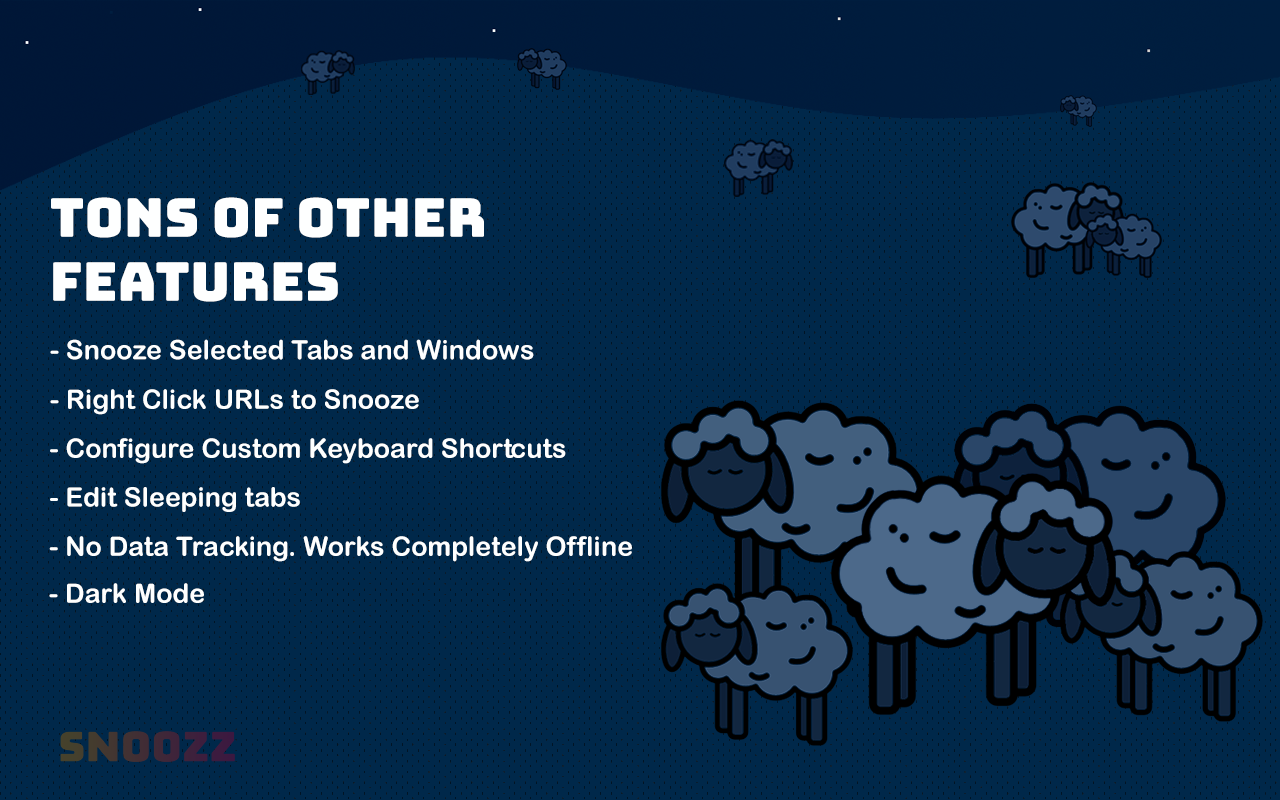
<style>
.page{position:relative;width:1280px;height:800px;background:#00284a}
.page>*{position:absolute;margin:0}
.t1{font:53.3px "Bungee-Regular";letter-spacing:0.005em;color:#feffff}
.t2{font:26.7px "ArialRoundedMTBold";letter-spacing:0.005em;color:#feffff}
</style>
<div class="page">
<p class="t1" style="left:51px;top:197px;width:433px;height:105px">Tons of other<br>features</p>
<p class="t2" style="left:50px;top:339px;width:484px;height:21px">- Snooze Selected Tabs and Windows</p>
<p class="t2" style="left:50px;top:389px;width:369px;height:26px">- Right Click URLs to Snooze</p>
<p class="t2" style="left:50px;top:438px;width:516px;height:26px">- Configure Custom Keyboard Shortcuts</p>
<p class="t2" style="left:50px;top:487px;width:250px;height:25px">- Edit Sleeping tabs</p>
<p class="t2" style="left:49px;top:536px;width:583px;height:26px">- No Data Tracking. Works Completely Offline</p>
<p class="t2" style="left:49px;top:583px;width:155px;height:20px">- Dark Mode</p>
</div>
